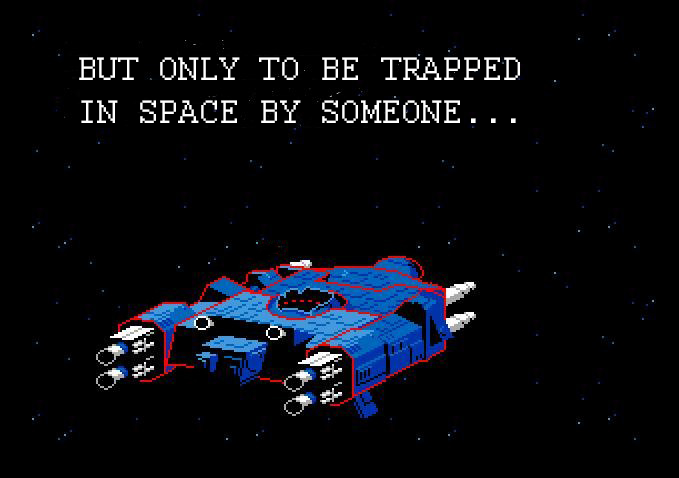
<style>
.page{position:relative;width:679px;height:478px;background:#000000}
.page>*{position:absolute;margin:0}
.t1{font:36px "Courier";color:#ffffff}
</style>
<div class="page">
<p class="t1" style="left:79px;top:57px;width:441px;height:66px">BUT ONLY TO BE TRAPPED<br>IN SPACE BY SOMEONE...</p>
</div>
